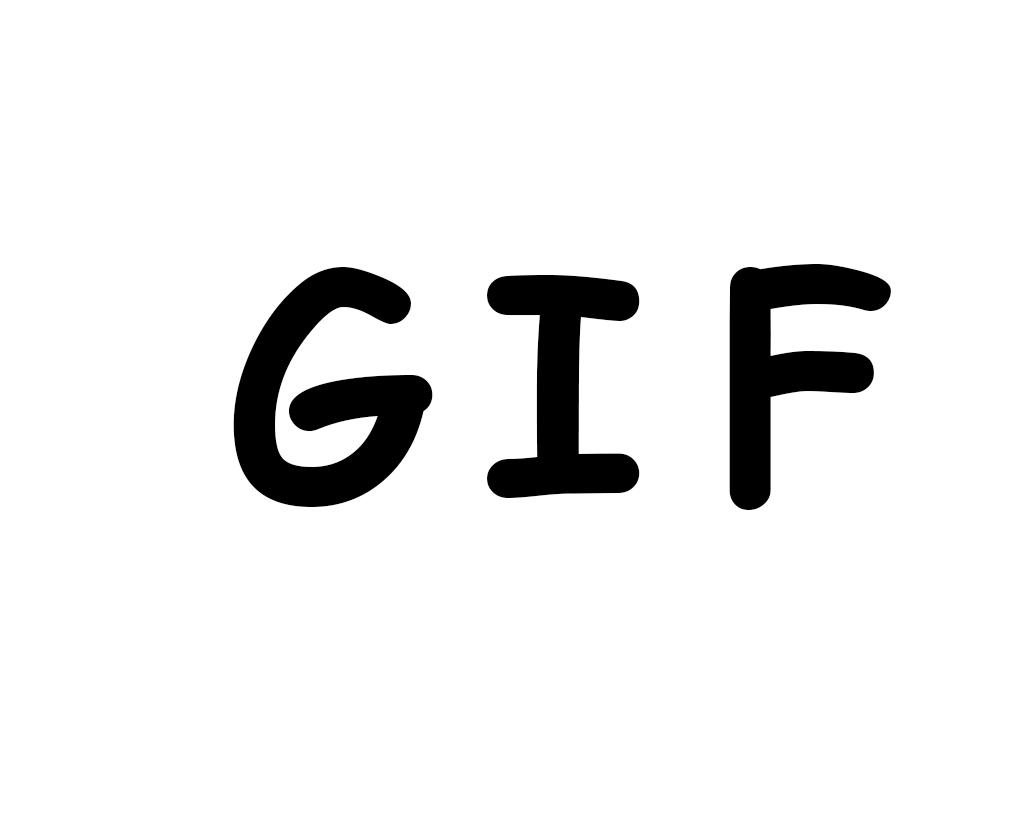
<style>
.page{position:relative;width:1035px;height:816px;background:#ffffff}
.page>*{position:absolute;margin:0}
.t1{font:300px "ComicSansMS-Bold";color:#000000}
</style>
<div class="page">
<p class="t1" style="left:233px;top:267px;width:200px;height:240px">G</p>
<p class="t1" style="left:729px;top:264px;width:162px;height:246px">F</p>
<p class="t1" style="left:487px;top:275px;width:153px;height:223px">I</p>
</div>
